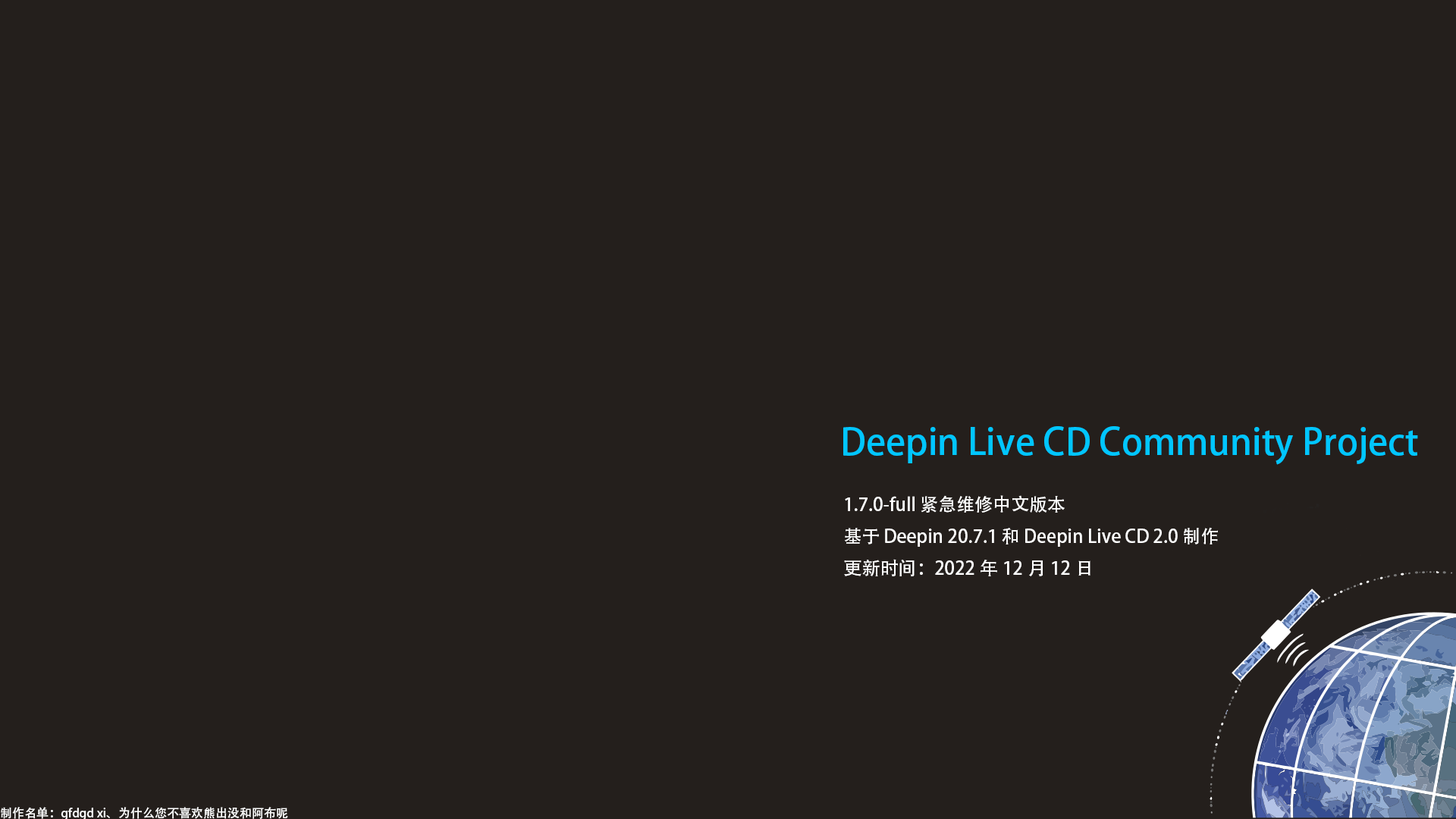
<style>
.page{position:relative;width:1456px;height:819px;background:#241f1c}
.page>*{position:absolute;margin:0}
.t1{font:36.4px "AdobeHeitiStd-Regular";color:#00c6ff}
.t2{font:18.2px "AdobeHeitiStd-Regular";color:#ffffff}
.t3{font:12.1px "AdobeHeitiStd-Regular";color:#ffffff}
</style>
<div class="page">
<p class="t1" style="left:843px;top:426px;width:575px;height:39px">Deepin Live CD Community Project</p>
<p class="t2" style="left:844px;top:495px;width:374px;height:82px">1.7.0-full 紧急维修中文版本<br>基于 Deepin 20.7.1 和 Deepin Live CD 2.0 制作<br>更新时间：2022年12月12日</p>
<p class="t3" style="left:1px;top:807px;width:287px;height:14px">制作名单：gfdgd xi、为什么您不喜欢熊出没和阿布呢</p>
</div>
